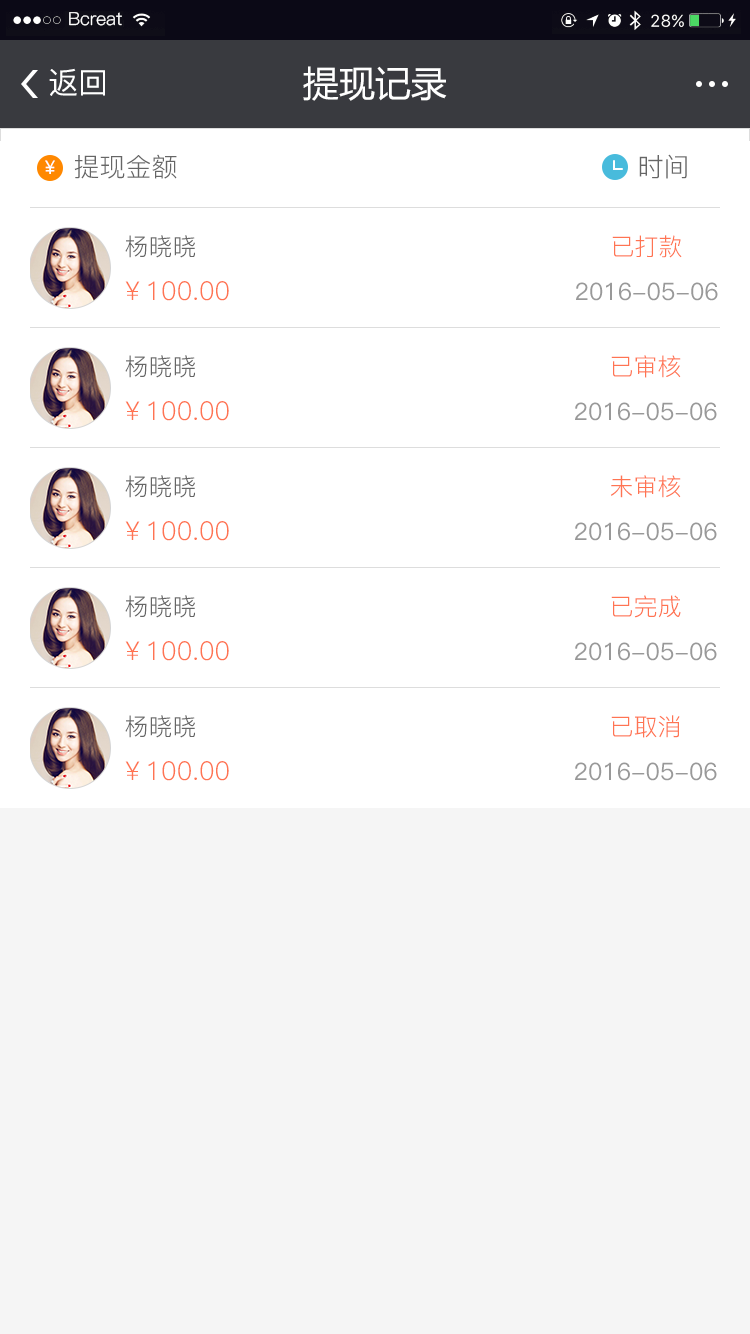
<style>
.page{position:relative;width:750px;height:1334px;background:#ffffff}
.page>*{position:absolute;margin:0}
.t1{font:18px "PingFang-SC-Regular";color:#ffffff}
.t2{font:36px "MicrosoftYaHei";color:#ffffff}
.t3{font:30px "PingFang-SC-Medium"}
.t4{font:30px "PingFang-SC-Medium";color:#ffffff}
.t5{font:18px "MicrosoftYaHei";letter-spacing:0.075em;color:#ffffff}
.t6{font:26px "PingFang-SC-Regular";color:#666666}
.t7{font:24px "PingFang-SC-Regular";color:#666666}
.t8{font:24px "PingFang-SC-Regular";color:#ff7452}
.t9{font:26px "PingFang-SC-Regular";color:#ff7452}
.t10{font:24px "PingFang-SC-Medium";color:#999999}
</style>
<div class="page">
<p class="t1" style="left:69px;top:12px;width:53px;height:14px">Bcreat</p>
<p class="t2" style="left:303px;top:65px;width:144px;height:36px">提现申请</p>
<p class="t3" style="left:49px;top:69px;width:56px;height:28px">返回</p>
<p class="t4" style="left:49px;top:68px;width:56px;height:28px">返回</p>
<p class="t2" style="left:303px;top:66px;width:144px;height:35px">提现记录</p>
<p class="t5" style="left:45px;top:160px;width:10px;height:14px">￥</p>
<p class="t6" style="left:74px;top:154px;width:103px;height:25px">提现金额</p>
<p class="t6" style="left:639px;top:154px;width:48px;height:25px">时间</p>
<p class="t7" style="left:125px;top:235px;width:70px;height:23px">杨晓晓</p>
<p class="t8" style="left:612px;top:235px;width:70px;height:23px">已打款</p>
<p class="t9" style="left:125px;top:281px;width:104px;height:20px">￥100.00</p>
<p class="t10" style="left:576px;top:282px;width:142px;height:19px">2016-05-06</p>
<p class="t7" style="left:125px;top:355px;width:70px;height:23px">杨晓晓</p>
<p class="t8" style="left:611px;top:355px;width:70px;height:23px">已审核</p>
<p class="t9" style="left:125px;top:401px;width:104px;height:20px">￥100.00</p>
<p class="t10" style="left:575px;top:402px;width:142px;height:19px">2016-05-06</p>
<p class="t7" style="left:125px;top:475px;width:70px;height:23px">杨晓晓</p>
<p class="t8" style="left:611px;top:475px;width:70px;height:23px">未审核</p>
<p class="t9" style="left:125px;top:521px;width:104px;height:20px">￥100.00</p>
<p class="t10" style="left:575px;top:522px;width:142px;height:19px">2016-05-06</p>
<p class="t7" style="left:125px;top:595px;width:70px;height:23px">杨晓晓</p>
<p class="t8" style="left:611px;top:595px;width:70px;height:23px">已完成</p>
<p class="t9" style="left:125px;top:641px;width:104px;height:20px">￥100.00</p>
<p class="t10" style="left:575px;top:642px;width:142px;height:19px">2016-05-06</p>
<p class="t7" style="left:125px;top:715px;width:70px;height:23px">杨晓晓</p>
<p class="t8" style="left:611px;top:715px;width:69px;height:23px">已取消</p>
<p class="t9" style="left:125px;top:761px;width:104px;height:20px">￥100.00</p>
<p class="t10" style="left:575px;top:762px;width:142px;height:19px">2016-05-06</p>
</div>
